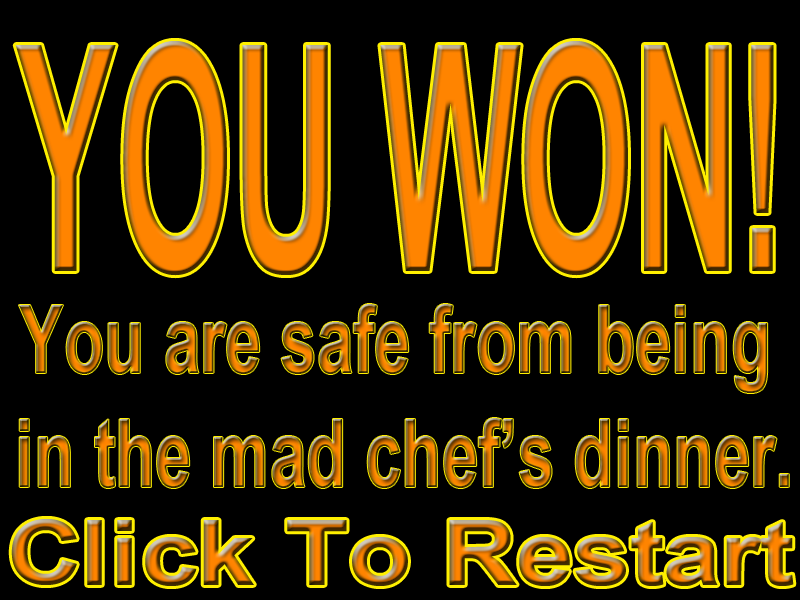
<style>
.page{position:relative;width:800px;height:600px;background:#000000}
.page>*{position:absolute;margin:0}
.t1{font:315.5px "Arial-BoldMT";scale:0.47 1}
.t2{font:95.2px "Arial-BoldMT";scale:0.69 1}
.t3{font:91.1px "Arial-BoldMT";scale:1.15 1}
</style>
<div class="page">
<p class="t1" style="left:15px;top:41px;width:759px;height:235px">YOU WON!</p>
<p class="t2" style="left:19px;top:304px;width:770px;height:184px;text-align:center">You are safe from being <br>in the mad chef’s dinner.</p>
<p class="t3" style="left:11px;top:519px;width:783px;height:67px">Click To Restart</p>
</div>
